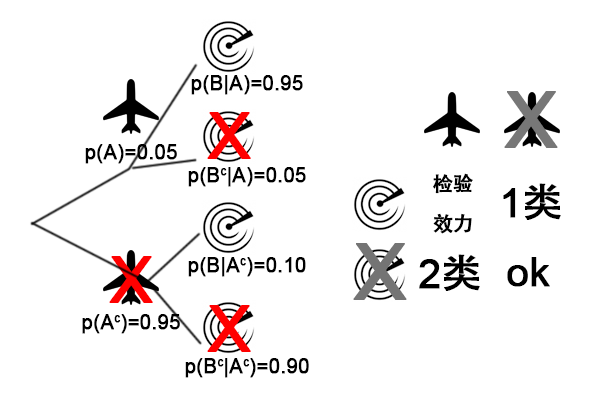
<style>
.page{position:relative;width:600px;height:396px;background:#ffffff}
.page>*{position:absolute;margin:0}
.t1{font:20px "ArialMT";color:#000000;font-weight:bold}
.t2{font:64px "ArialMT";color:#ff0000;font-weight:bold}
.t3{font:20px "AdobeHeitiStd-Regular";color:#000000;font-weight:bold}
.t4{font:40px "ArialMT";color:#000000;font-weight:bold}
.t5{font:40px "AdobeHeitiStd-Regular";color:#000000;font-weight:bold}
.t6{font:78px "ArialMT";color:#747474;font-weight:bold}
</style>
<div class="page">
<p class="t1" style="left:191px;top:75px;width:112px;height:20px">p(B|A)=0.95</p>
<p class="t2" style="left:207px;top:112px;width:44px;height:47px">X</p>
<p class="t1" style="left:85px;top:144px;width:92px;height:20px">p(A)=0.05</p>
<p class="t1" style="left:188px;top:167px;width:118px;height:20px">p(Bc|A)=0.05</p>
<p class="t3" style="left:433px;top:173px;width:40px;height:61px;text-align:center">检验<br>效力</p>
<p class="t4" style="left:503px;top:183px;width:58px;height:37px">1<span class="t5">类</span></p>
<p class="t6" style="left:353px;top:243px;width:54px;height:57px">X</p>
<p class="t2" style="left:109px;top:256px;width:44px;height:47px">X</p>
<p class="t1" style="left:188px;top:257px;width:118px;height:20px">p(B|Ac)=0.10</p>
<p class="t4" style="left:419px;top:254px;width:61px;height:37px">2<span class="t5">类</span></p>
<p class="t4" style="left:507px;top:257px;width:43px;height:30px">ok</p>
<p class="t2" style="left:207px;top:305px;width:44px;height:47px">X</p>
<p class="t1" style="left:82px;top:314px;width:98px;height:20px">p(Ac)=0.95</p>
<p class="t1" style="left:185px;top:358px;width:124px;height:20px">p(Bc|Ac)=0.90</p>
</div>
